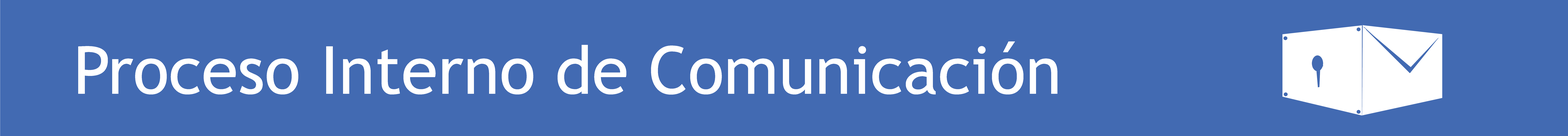
<style>
.page{position:relative;width:1568px;height:136px;background:#426ab2}
.page>*{position:absolute;margin:0}
.t1{font:66.4px "TrebuchetMS";color:#ffffff}
</style>
<div class="page">
<p class="t1" style="left:78px;top:42px;width:979px;height:53px">Proceso Interno de Comunicación</p>
</div>
